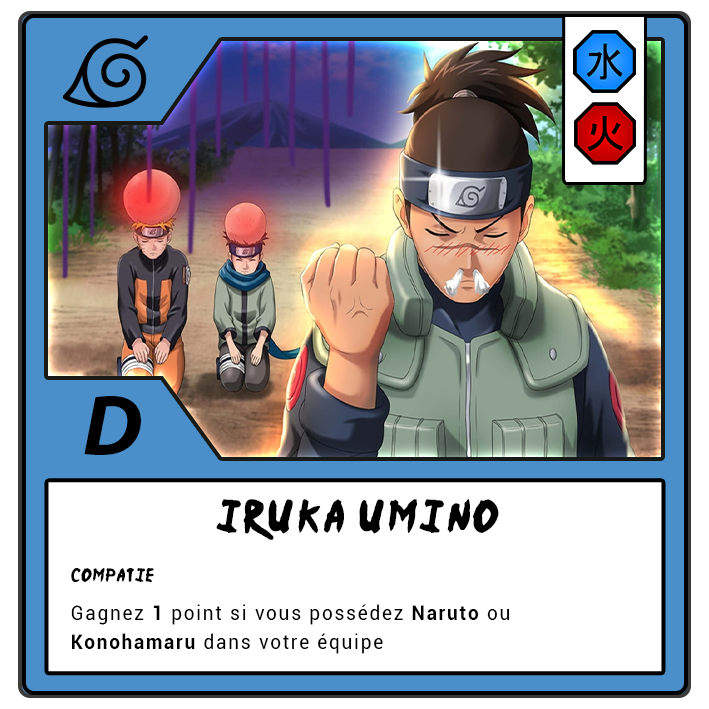
<style>
.page{position:relative;width:709px;height:709px;background:#ffffff}
.page>*{position:absolute;margin:0}
.t1{font:87.5px "MyriadPro-BoldIt";letter-spacing:-0.12em;color:#000000}
.t2{font:37.5px "Ninja-Naruto";letter-spacing:0.1em;color:#000000}
.t3{font:15.4px "Ninja-Naruto";letter-spacing:0.07em;color:#000000}
.t4{font:20.8px/29.2px "Roboto-Regular";letter-spacing:0.1em;color:#000000;scale:0.9 1}
.t5{font:20.8px/29.2px "Roboto-Bold";letter-spacing:0.1em;color:#000000;scale:0.9 1}
</style>
<div class="page">
<p class="t1" style="left:84px;top:396px;width:57px;height:59px">D</p>
<p class="t2" style="left:216px;top:498px;width:283px;height:42px">Iruka Umino</p>
<p class="t3" style="left:71px;top:568px;width:83px;height:14px">compatie</p>
<p class="t4" style="left:71px;top:604px;width:439px;height:50px">Gagnez <span class="t5">1 </span>point si vous possédez <span class="t5">Naruto </span>ou <br><span class="t5">Konohamaru </span>dans votre équipe</p>
</div>
